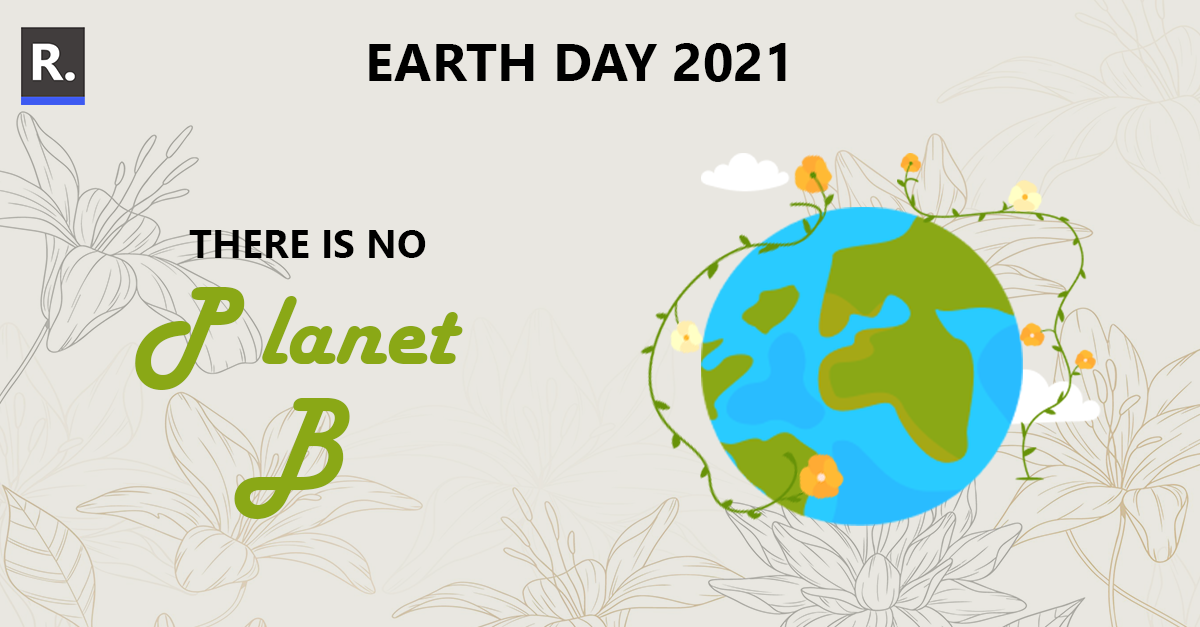
<style>
.page{position:relative;width:1200px;height:627px;background:#e9e7e1}
.page>*{position:absolute;margin:0}
.t1{font:53.4px "SegoeUI-Bold";color:#000000}
.t2{font:39.4px "SegoeUI-Bold";color:#000000}
.t3{font:102.1px "HarlowSolid";color:#8aa816}
.t4{font:114.9px "HarlowSolid";color:#8aa816}
</style>
<div class="page">
<p class="t1" style="left:369px;top:43px;width:417px;height:39px">EARTH DAY 2021</p>
<p class="t2" style="left:189px;top:230px;width:237px;height:28px">THERE IS NO</p>
<p class="t3" style="left:135px;top:287px;width:328px;height:103px"><span class="t4">P </span>lanet</p>
<p class="t4" style="left:234px;top:398px;width:116px;height:121px">B</p>
</div>
